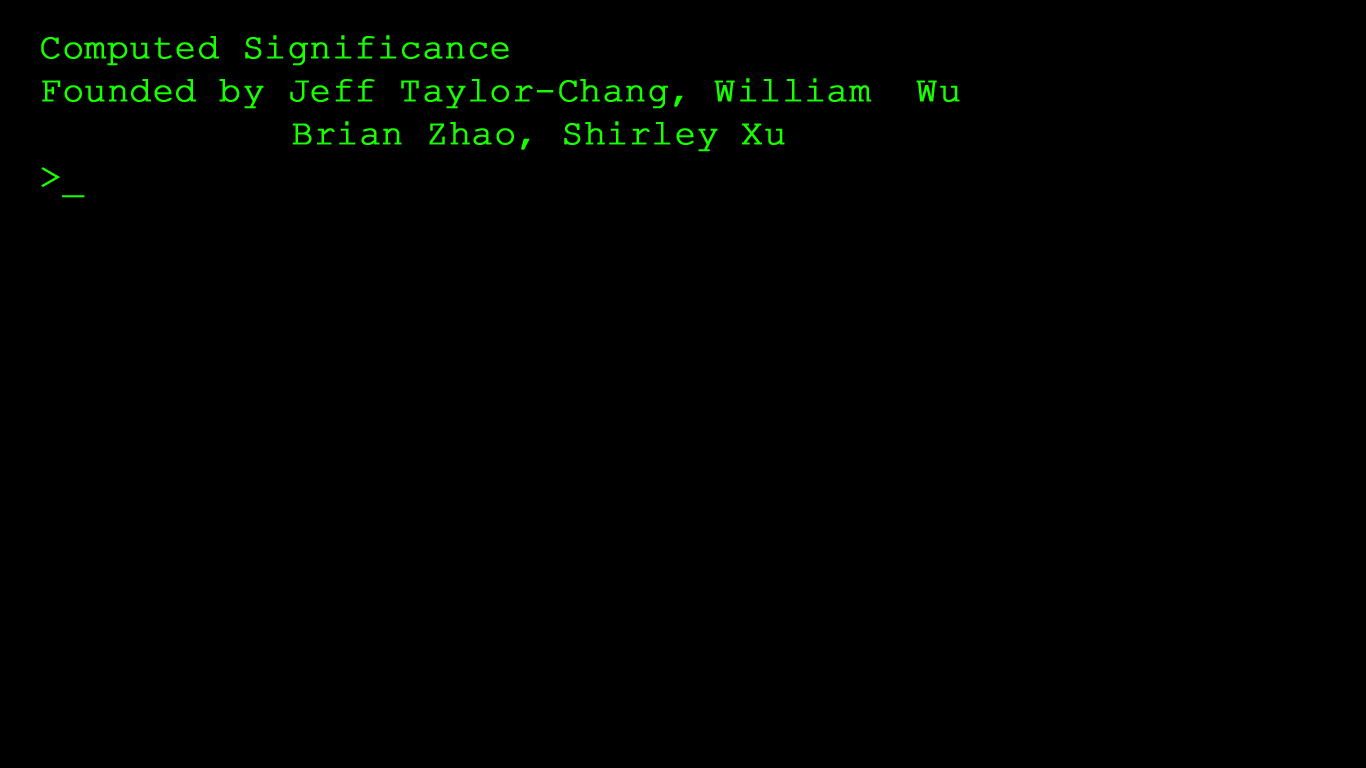
<style>
.page{position:relative;width:1366px;height:768px;background:#000000}
.page>*{position:absolute;margin:0}
.t1{font:35.9px "CourierNewPSMT";color:#18ff00;font-weight:bold}
</style>
<div class="page">
<p class="t1" style="left:41px;top:35px;width:919px;height:163px">Computed Significance<br>Founded by Jeff Taylor-Chang, William  Wu<br>       Brian Zhao, Shirley Xu<br>&gt;_</p>
</div>
